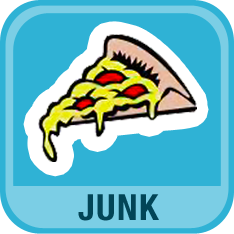
<style>
.page{position:relative;width:234px;height:234px;background:#2fb2d5}
.page>*{position:absolute;margin:0}
.t1{font:36px "HelveticaNeue-BoldCond";letter-spacing:0.04em;color:#024557}
</style>
<div class="page">
<p class="t1" style="left:78px;top:194px;width:81px;height:27px">JUNK</p>
</div>
